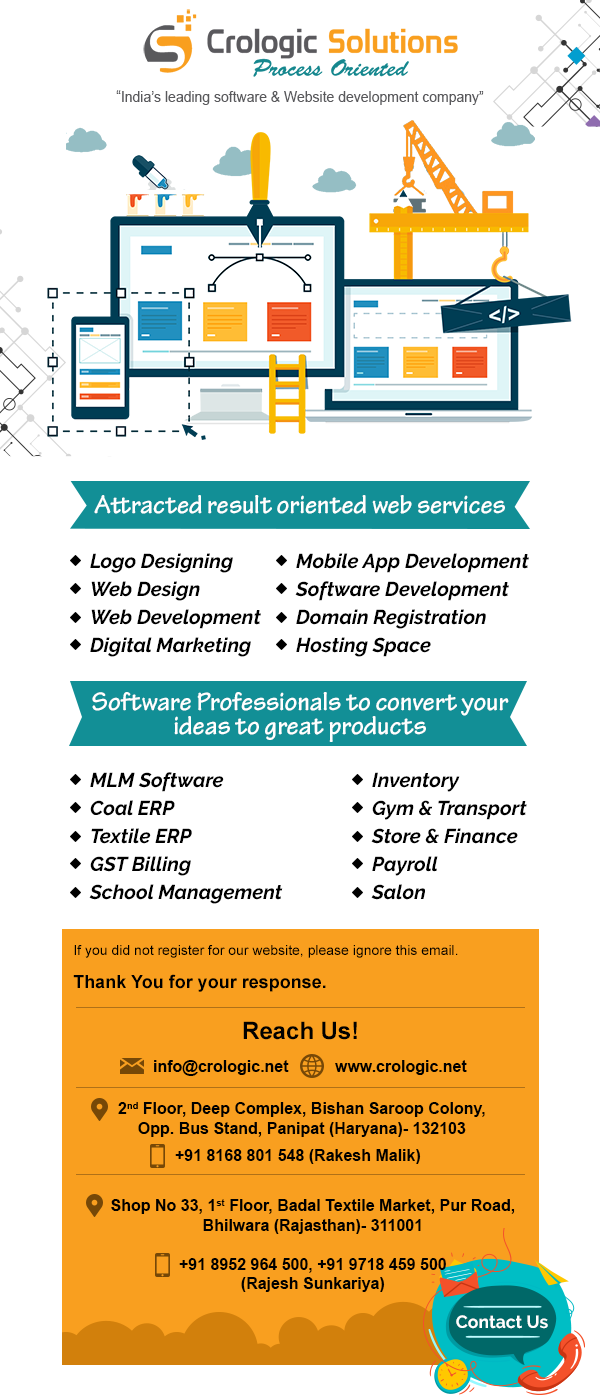
<style>
.page{position:relative;width:600px;height:1400px;background:#ffffff}
.page>*{position:absolute;margin:0}
.t1{font:14.7px "ArialMT";color:#59595c;scale:0.95 1}
.t2{font:27.3px "TektonPro-Bold";color:#ffffff;scale:0.95 1}
.t3{font:20px/28px "Raleway-BoldItalic";color:#000000}
.t4{font:27.3px/24px "TektonPro-Bold";color:#ffffff;scale:0.95 1}
.t5{font:14px "ArialMT";color:#000000}
.t6{font:18px "Arial-BoldMT";color:#000000}
.t7{font:24px "Arial-BoldMT";color:#000000}
.t8{font:16px "Arial-BoldMT";color:#000000}
.t9{font:17.7px "Raleway-Bold";color:#ffffff}
</style>
<div class="page">
<p class="t1" style="left:116px;top:90px;width:368px;height:15px">“India’s leading software &amp; Website development company”</p>
<p class="t2" style="left:94px;top:495px;width:411px;height:19px">Attracted result oriented web services</p>
<p class="t3" style="left:90px;top:553px;width:171px;height:104px">Logo Designing<br>Web Design<br>Web Development<br>Digital Marketing</p>
<p class="t3" style="left:295px;top:553px;width:234px;height:104px">Mobile App Development<br>Software Development<br>Domain Registration<br>Hosting Space</p>
<p class="t4" style="left:92px;top:692px;width:417px;height:50px;text-align:center">Software Professionals to convert your<br>ideas to great products</p>
<p class="t3" style="left:89px;top:772px;width:194px;height:132px">MLM Software<br>Coal ERP<br>Textile ERP<br>GST Billing<br>School Management</p>
<p class="t3" style="left:371px;top:772px;width:156px;height:128px">Inventory<br>Gym &amp; Transport<br>Store &amp; Finance<br>Payroll<br>Salon</p>
<p class="t5" style="left:74px;top:945px;width:384px;height:13px">If you did not register for our website, please ignore this email.</p>
<p class="t6" style="left:73px;top:974px;width:253px;height:18px">Thank You for your response.</p>
<p class="t7" style="left:243px;top:1021px;width:114px;height:19px">Reach Us!</p>
<p class="t8" style="left:154px;top:1060px;width:135px;height:16px">info@crologic.net</p>
<p class="t8" style="left:335px;top:1060px;width:132px;height:15px">www.crologic.net</p>
<p class="t8" style="left:118px;top:1102px;width:367px;height:35px;text-align:center">2nd Floor, Deep Complex, Bishan Saroop Colony, <br>Opp. Bus Stand, Panipat (Haryana)- 132103</p>
<p class="t8" style="left:175px;top:1149px;width:246px;height:15px">+91 8168 801 548 (Rakesh Malik)</p>
<p class="t8" style="left:111px;top:1199px;width:404px;height:35px;text-align:center">Shop No 33, 1st Floor, Badal Textile Market, Pur Road, Bhilwara (Rajasthan)- 311001</p>
<p class="t8" style="left:179px;top:1258px;width:267px;height:34px;text-align:center">+91 8952 964 500, +91 9718 459 500<br>(Rajesh Sunkariya)</p>
<p class="t9" style="left:456px;top:1315px;width:92px;height:14px">Contact Us</p>
</div>
